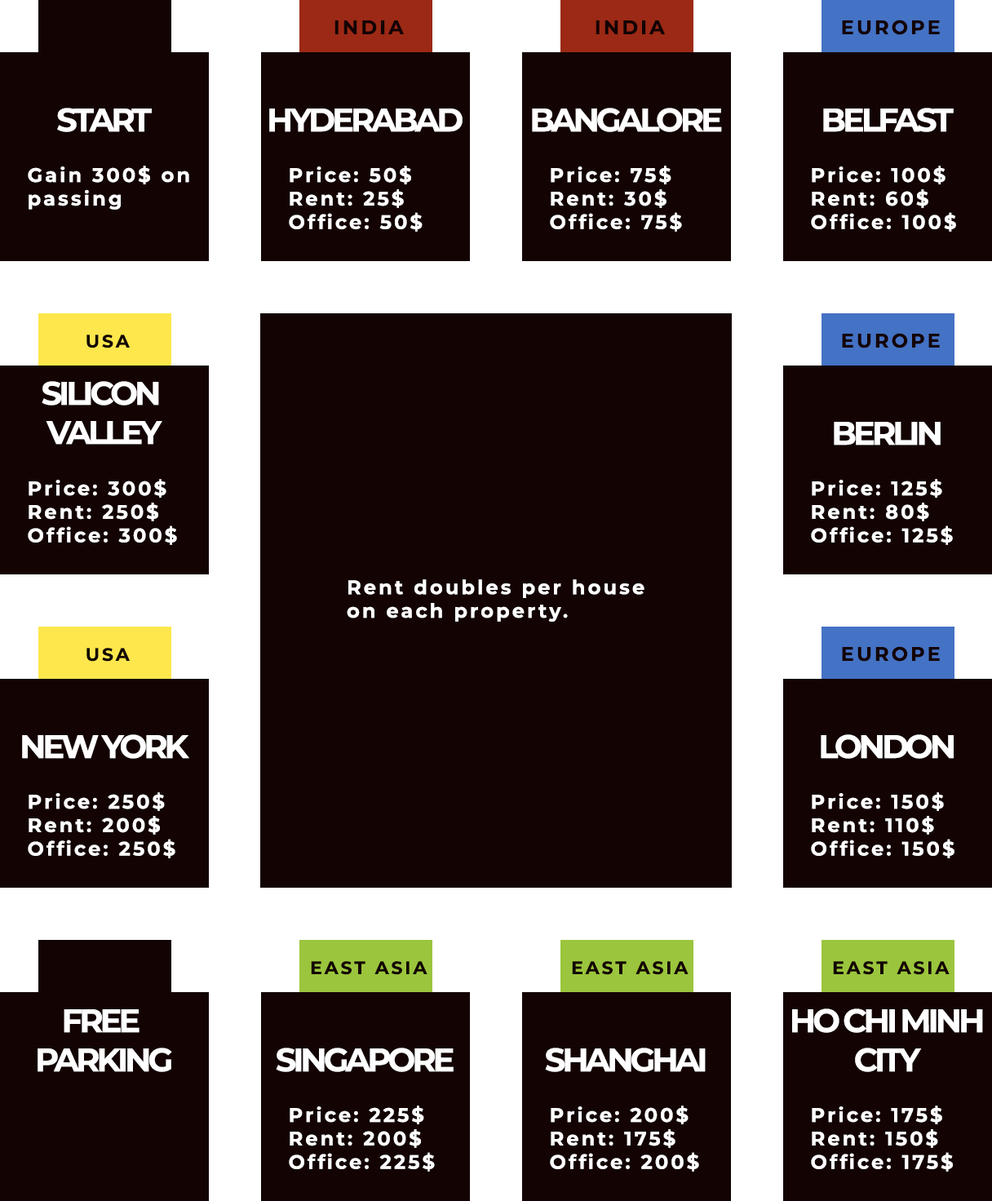
<style>
.page{position:relative;width:992px;height:1201px;background:#130303}
.page>*{position:absolute;margin:0}
.t1{font:19.6px "Montserrat-Bold";letter-spacing:0.13em;color:#130303}
.t2{font:32.6px "Montserrat-Bold";letter-spacing:-0.1em;color:#ffffff}
.t3{font:19.6px "Montserrat-Bold";letter-spacing:0.13em;color:#ffffff}
.t4{font:18px "Montserrat-Bold";letter-spacing:0.13em;color:#130303}
</style>
<div class="page">
<p class="t1" style="left:335px;top:20px;width:69px;height:14px">INDIA</p>
<p class="t1" style="left:596px;top:20px;width:69px;height:14px">INDIA</p>
<p class="t1" style="left:842px;top:20px;width:98px;height:15px">EUROPE</p>
<p class="t2" style="left:57px;top:108px;width:95px;height:24px">START</p>
<p class="t2" style="left:269px;top:109px;width:194px;height:23px">HYDERABAD</p>
<p class="t2" style="left:532px;top:108px;width:190px;height:24px">BANGALORE</p>
<p class="t2" style="left:824px;top:108px;width:130px;height:24px">BELFAST</p>
<p class="t3" style="left:28px;top:166px;width:161px;height:44px">Gain 300$ on<br>passing</p>
<p class="t3" style="left:289px;top:166px;width:134px;height:66px">Price: 50$<br>Rent: 25$<br>Office: 50$</p>
<p class="t3" style="left:550px;top:166px;width:132px;height:66px">Price: 75$<br>Rent: 30$<br>Office: 75$</p>
<p class="t3" style="left:811px;top:166px;width:146px;height:66px">Price: 100$<br>Rent: 60$<br>Office: 100$</p>
<p class="t4" style="left:87px;top:335px;width:43px;height:14px">USA</p>
<p class="t1" style="left:842px;top:333px;width:98px;height:16px">EUROPE</p>
<p class="t2" style="left:42px;top:381px;width:120px;height:64px;text-align:center">SILICON <br>VALLEY</p>
<p class="t2" style="left:834px;top:422px;width:107px;height:24px">BERLIN</p>
<p class="t3" style="left:28px;top:479px;width:149px;height:66px">Price: 300$<br>Rent: 250$<br>Office: 300$</p>
<p class="t3" style="left:811px;top:479px;width:142px;height:66px">Price: 125$<br>Rent: 80$<br>Office: 125$</p>
<p class="t3" style="left:347px;top:580px;width:298px;height:42px">Rent doubles per house <br>on each property.</p>
<p class="t4" style="left:87px;top:648px;width:43px;height:14px">USA</p>
<p class="t1" style="left:842px;top:646px;width:98px;height:16px">EUROPE</p>
<p class="t2" style="left:22px;top:735px;width:167px;height:24px">NEW YORK</p>
<p class="t2" style="left:821px;top:735px;width:133px;height:24px">LONDON</p>
<p class="t3" style="left:28px;top:793px;width:147px;height:66px">Price: 250$<br>Rent: 200$<br>Office: 250$</p>
<p class="t3" style="left:811px;top:793px;width:144px;height:66px">Price: 150$<br>Rent: 110$<br>Office: 150$</p>
<p class="t4" style="left:311px;top:961px;width:117px;height:14px">EAST ASIA</p>
<p class="t4" style="left:572px;top:961px;width:117px;height:14px">EAST ASIA</p>
<p class="t4" style="left:833px;top:961px;width:117px;height:14px">EAST ASIA</p>
<p class="t2" style="left:38px;top:1010px;width:134px;height:62px;text-align:center">FREE <br>PARKING</p>
<p class="t2" style="left:793px;top:1009px;width:191px;height:63px;text-align:center">HO CHI MINH<br>CITY</p>
<p class="t2" style="left:276px;top:1048px;width:178px;height:24px">SINGAPORE</p>
<p class="t2" style="left:545px;top:1048px;width:161px;height:24px">SHANGHAI</p>
<p class="t3" style="left:289px;top:1106px;width:146px;height:66px">Price: 225$<br>Rent: 200$<br>Office: 225$</p>
<p class="t3" style="left:550px;top:1106px;width:149px;height:66px">Price: 200$<br>Rent: 175$<br>Office: 200$</p>
<p class="t3" style="left:811px;top:1106px;width:142px;height:66px">Price: 175$<br>Rent: 150$<br>Office: 175$</p>
</div>
